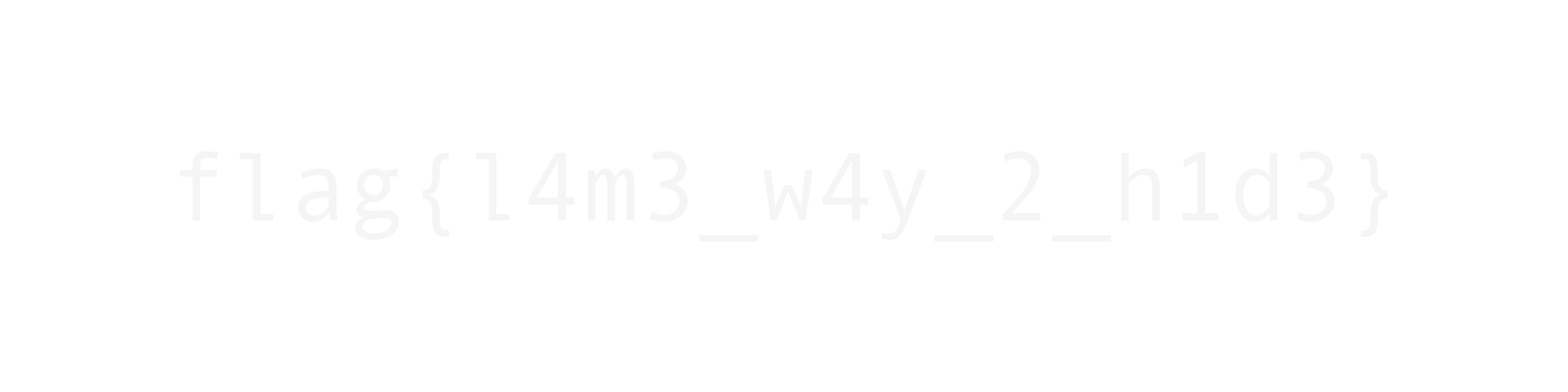
<style>
.page{position:relative;width:1568px;height:392px;background:#ffffff}
.page>*{position:absolute;margin:0}
.t1{font:98px "AndaleMono";color:#f5f5f5}
</style>
<div class="page">
<p class="t1" style="left:180px;top:151px;width:1208px;height:90px">flag{l4m3_w4y_2_h1d3}</p>
</div>
